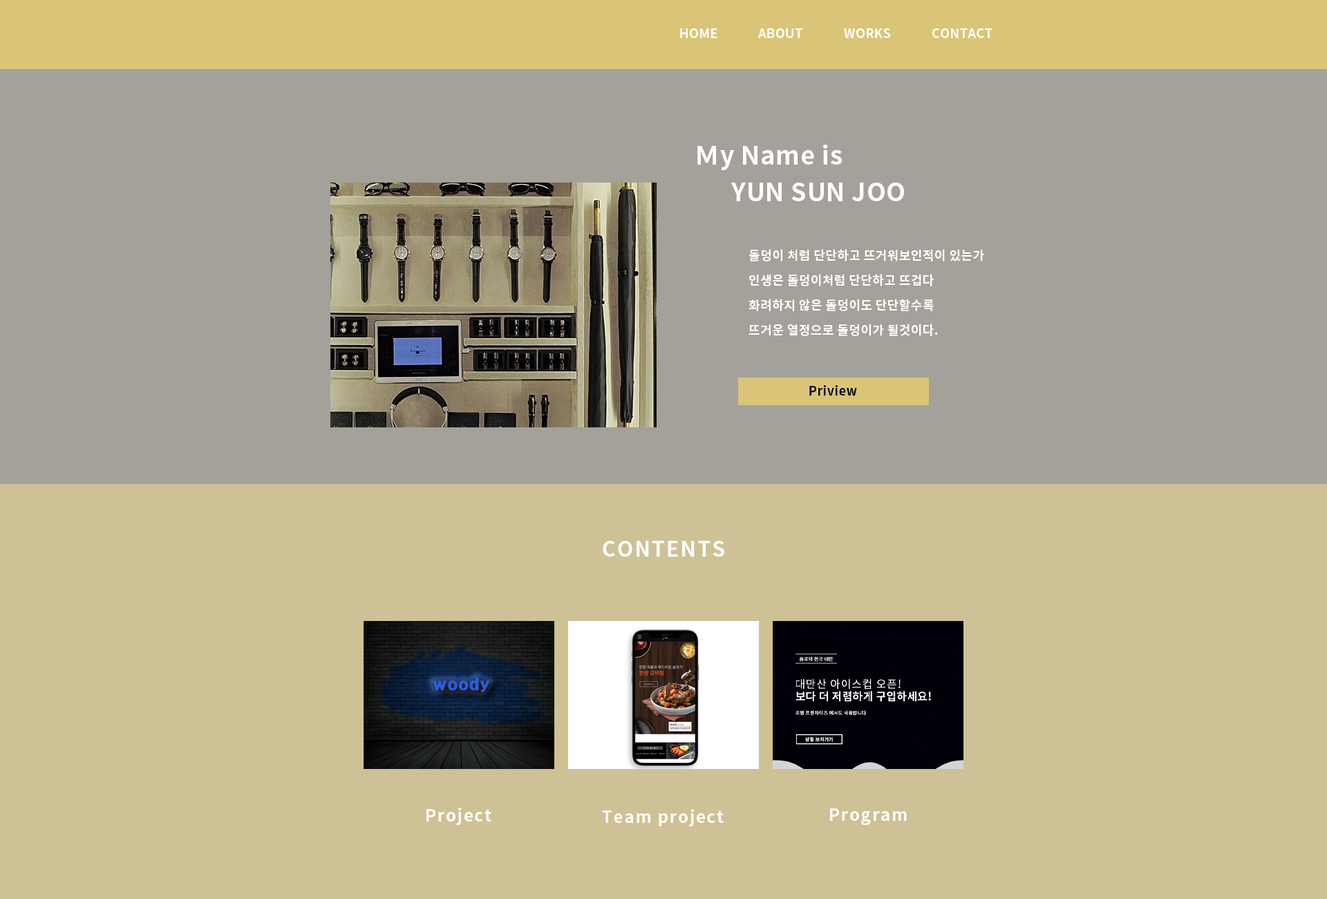
<style>
.page{position:relative;width:1327px;height:899px;background:#cec195}
.page>*{position:absolute;margin:0}
.t1{font:12.4px "NotoSansCJKkr-Bold";letter-spacing:0.025em;color:#ffffff}
.t2{font:24.9px "NotoSansCJKkr-Bold";letter-spacing:0.025em;color:#ffffff}
.t3{font:12.4px "NotoSansCJKkr-Bold";letter-spacing:0.025em;color:#000000}
.t4{font:20.7px "NotoSansCJKkr-Bold";letter-spacing:0.075em;color:#ffffff}
.t5{font:16.6px "NotoSansCJKkr-Bold";letter-spacing:0.075em;color:#ffffff}
</style>
<div class="page">
<p class="t1" style="left:680px;top:28px;width:37px;height:10px">HOME</p>
<p class="t1" style="left:758px;top:28px;width:44px;height:10px">ABOUT</p>
<p class="t1" style="left:844px;top:28px;width:46px;height:10px">WORKS</p>
<p class="t1" style="left:932px;top:28px;width:61px;height:10px">CONTACT</p>
<p class="t2" style="left:697px;top:144px;width:145px;height:26px">My Name is</p>
<p class="t2" style="left:731px;top:182px;width:173px;height:19px">YUN SUN JOO</p>
<p class="t1" style="left:749px;top:249px;width:235px;height:12px">돌덩이 처럼 단단하고 뜨거워보인적이 있는가</p>
<p class="t1" style="left:749px;top:274px;width:185px;height:12px">인생은 돌덩이처럼 단단하고 뜨겁다</p>
<p class="t1" style="left:749px;top:299px;width:185px;height:12px">화려하지 않은 돌덩이도 단단할수록</p>
<p class="t1" style="left:749px;top:323px;width:189px;height:13px">뜨거운 열정으로 돌덩이가 될것이다.</p>
<p class="t3" style="left:809px;top:385px;width:48px;height:10px">Priview</p>
<p class="t4" style="left:603px;top:541px;width:121px;height:15px">CONTENTS</p>
<p class="t5" style="left:426px;top:807px;width:65px;height:18px">Project</p>
<p class="t5" style="left:602px;top:809px;width:122px;height:17px">Team project</p>
<p class="t5" style="left:830px;top:808px;width:77px;height:17px">Program</p>
</div>
